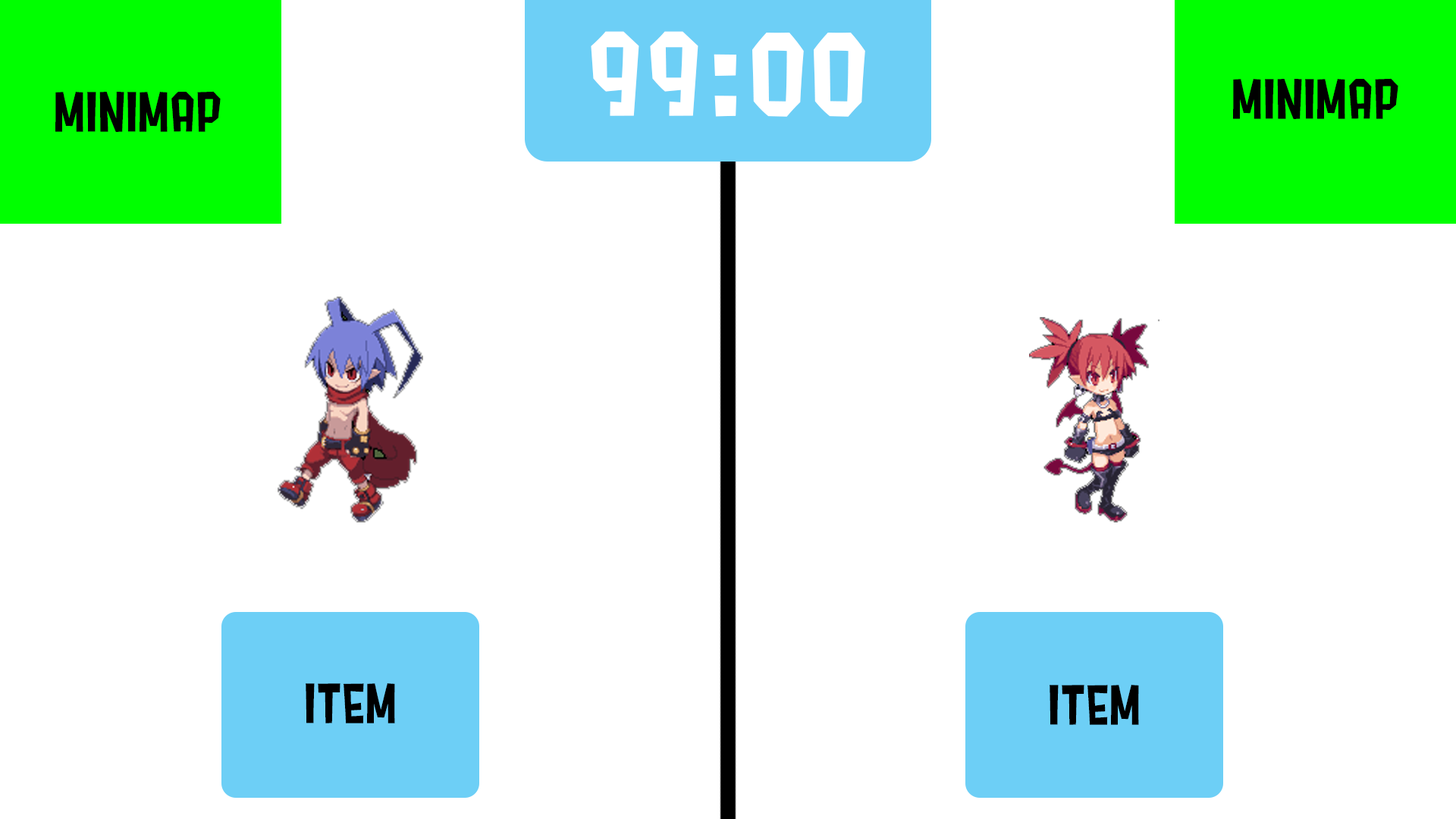
<style>
.page{position:relative;width:1456px;height:819px;background:#ffffff}
.page>*{position:absolute;margin:0}
.t1{font:113.7px "Splat2K";color:#ffffff}
.t2{font:54.6px "Splat2K";color:#000000}
</style>
<div class="page">
<p class="t1" style="left:591px;top:31px;width:274px;height:86px">99:00</p>
<p class="t2" style="left:1233px;top:78px;width:165px;height:41px">MINIMAP</p>
<p class="t2" style="left:55px;top:91px;width:166px;height:41px">MINIMAP</p>
<p class="t2" style="left:306px;top:683px;width:89px;height:40px">ITEM</p>
<p class="t2" style="left:1050px;top:685px;width:89px;height:40px">ITEM</p>
</div>
